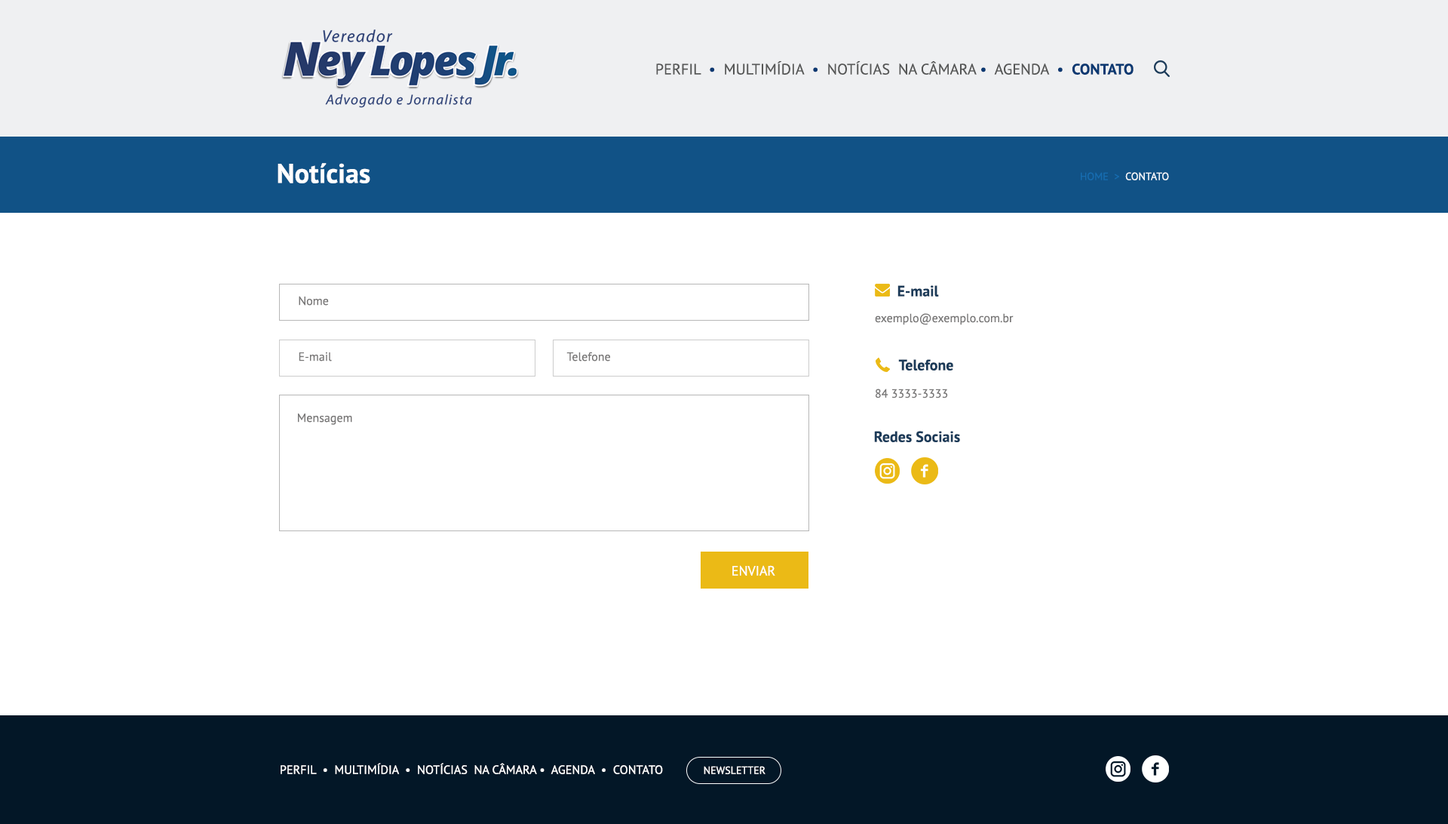
<style>
.page{position:relative;width:1448px;height:824px;background:#ffffff}
.page>*{position:absolute;margin:0}
.t1{font:15.1px "PTSans-Regular";color:#555656}
.t2{font:15.1px "PTSans-Regular";color:#0b3972}
.t3{font:15.1px "PTSans-Bold";color:#0b3972}
.t4{font:27.1px "PTSans-Bold";color:#ffffff}
.t5{font:10.6px "PTSans-Regular";color:#166cb0}
.t6{font:10.6px "PTSans-Regular";color:#f2f8fc}
.t7{font:15.1px "PTSans-Bold";color:#1c3b59}
.t8{font:12.1px "PTSans-Regular";color:#787777}
.t9{font:13.6px "PTSans-Regular";color:#ffffff}
.t10{font:12.1px "PTSans-Regular";color:#ffffff}
.t11{font:10.6px "PTSans-Regular";color:#ffffff}
</style>
<div class="page">
<p class="t1" style="left:656px;top:61px;width:477px;height:14px">PERFIL  <span class="t2">•</span>  MULTIMÍDIA  <span class="t2">•</span>  NOTÍCIAS  NA CÂMARA <span class="t2">•</span>  AGENDA <span class="t2"> •  </span><span class="t3">CONTATO</span></p>
<p class="t4" style="left:278px;top:163px;width:92px;height:20px">Notícias</p>
<p class="t5" style="left:1081px;top:172px;width:88px;height:8px">HOME  &gt;  <span class="t6">CONTATO</span></p>
<p class="t7" style="left:897px;top:285px;width:42px;height:11px">E-mail</p>
<p class="t8" style="left:299px;top:296px;width:30px;height:9px">Nome</p>
<p class="t8" style="left:875px;top:313px;width:139px;height:12px">exemplo@exemplo.com.br</p>
<p class="t8" style="left:299px;top:351px;width:33px;height:10px">E-mail</p>
<p class="t8" style="left:566px;top:351px;width:44px;height:10px">Telefone</p>
<p class="t7" style="left:898px;top:359px;width:55px;height:11px">Telefone</p>
<p class="t8" style="left:876px;top:388px;width:72px;height:10px">84 3333-3333</p>
<p class="t8" style="left:298px;top:413px;width:54px;height:12px">Mensagem</p>
<p class="t7" style="left:874px;top:431px;width:86px;height:11px">Redes Sociais</p>
<p class="t9" style="left:732px;top:565px;width:43px;height:10px">ENVIAR</p>
<p class="t10" style="left:281px;top:762px;width:382px;height:12px">PERFIL  •  MULTIMÍDIA  •  NOTÍCIAS  NA CÂMARA •  AGENDA  •  CONTATO</p>
<p class="t11" style="left:704px;top:765px;width:61px;height:9px">NEWSLETTER</p>
</div>
